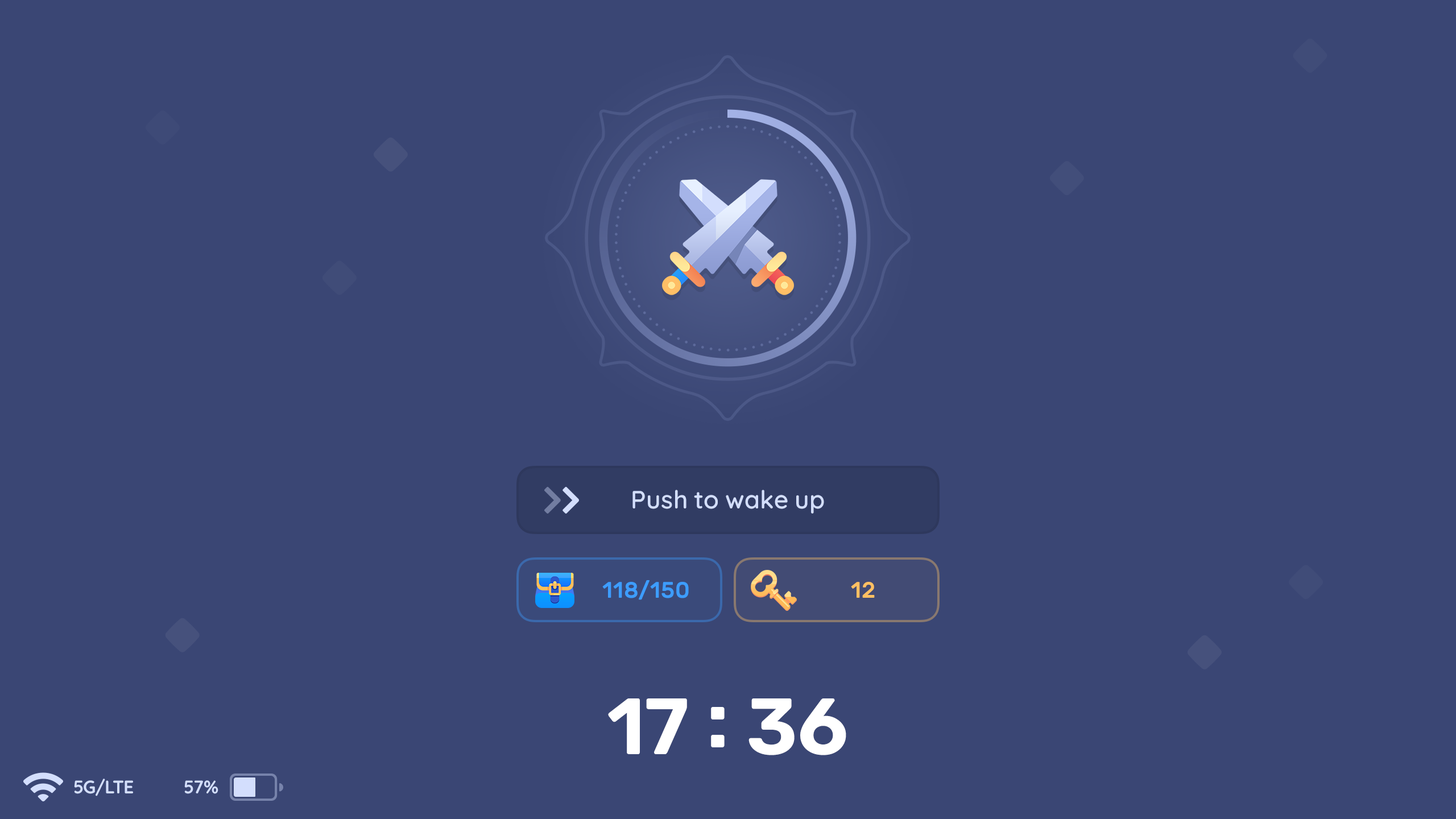
<style>
.page{position:relative;width:1456px;height:819px;background:#3a4674}
.page>*{position:absolute;margin:0}
.t1{font:25px "Quicksand-SemiBold";letter-spacing:-0.01em;color:#d3defd}
.t2{font:22.5px "Rubik-Medium";letter-spacing:-0.01em;color:#3d9dff}
.t3{font:22.5px "Rubik-Medium";letter-spacing:-0.01em;color:#ffc062}
.t4{font:79.6px "Rubik-SemiBold";color:#ffffff}
.t5{font:18.2px "Quicksand-Bold";letter-spacing:-0.01em;color:#d3defd}
</style>
<div class="page">
<p class="t1" style="left:632px;top:490px;width:192px;height:24px">Push to wake up</p>
<p class="t2" style="left:602px;top:580px;width:87px;height:20px">118/150</p>
<p class="t3" style="left:851px;top:582px;width:24px;height:16px">12</p>
<p class="t4" style="left:608px;top:698px;width:238px;height:57px">17 : 36</p>
<p class="t5" style="left:74px;top:779px;width:59px;height:17px">5G/LTE</p>
<p class="t5" style="left:184px;top:780px;width:34px;height:14px">57%</p>
</div>
